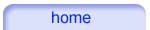
<style>
.page{position:relative;width:150px;height:30px;background:#dce1fb}
.page>*{position:absolute;margin:0}
.t1{font:16px "ArialMT";color:#092ff6}
</style>
<div class="page">
<p class="t1" style="left:52px;top:11px;width:39px;height:13px">home</p>
</div>
